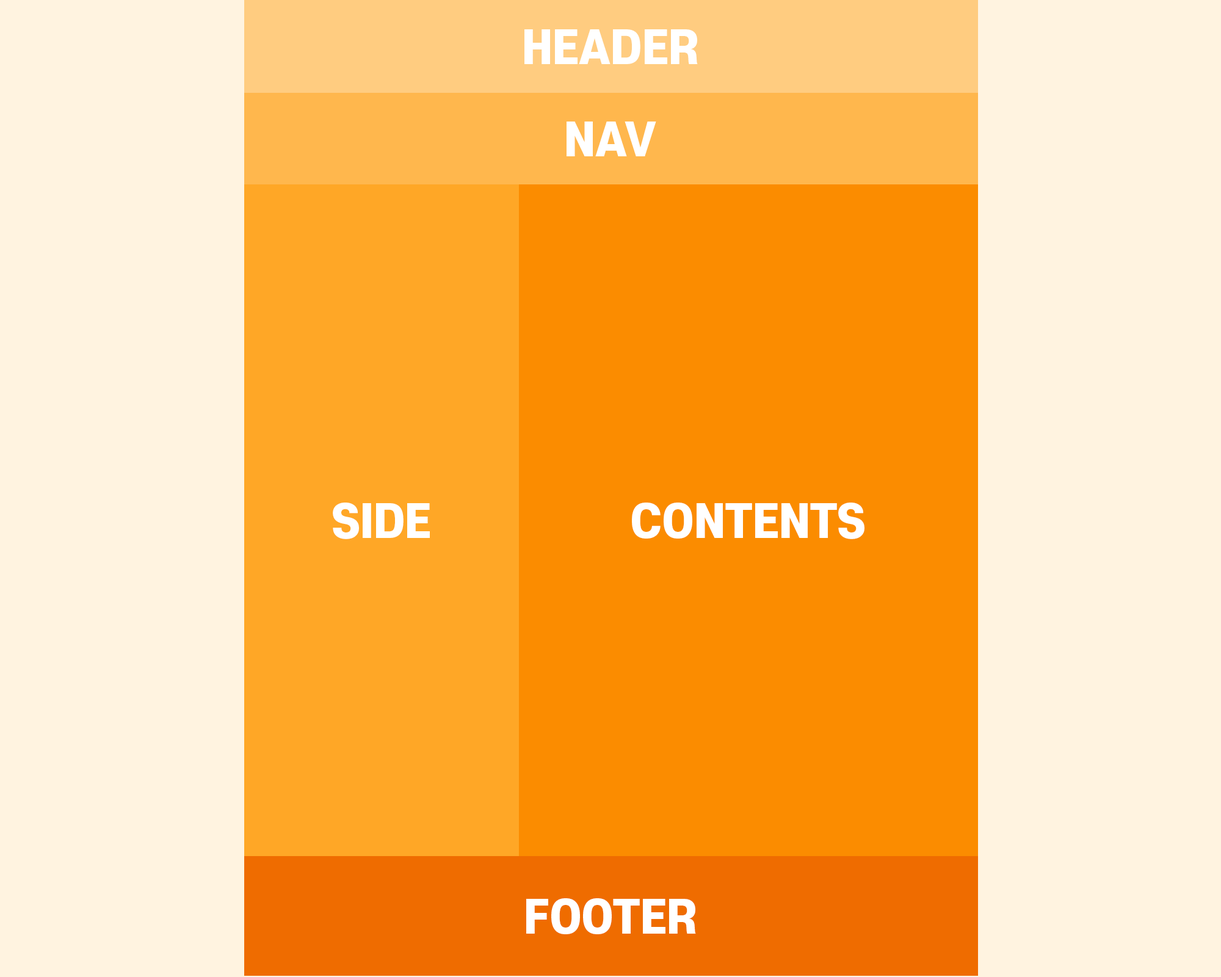
<style>
.page{position:relative;width:1221px;height:977px;background:#fff3e0}
.page>*{position:absolute;margin:0}
.t1{font:44px "S-CoreDream-8Heavy";color:#ffffff}
</style>
<div class="page">
<p class="t1" style="left:524px;top:29px;width:174px;height:35px">HEADER</p>
<p class="t1" style="left:566px;top:121px;width:90px;height:35px">NAV</p>
<p class="t1" style="left:333px;top:502px;width:97px;height:37px">SIDE</p>
<p class="t1" style="left:632px;top:502px;width:232px;height:37px">CONTENTS</p>
<p class="t1" style="left:526px;top:898px;width:170px;height:36px">FOOTER</p>
</div>
